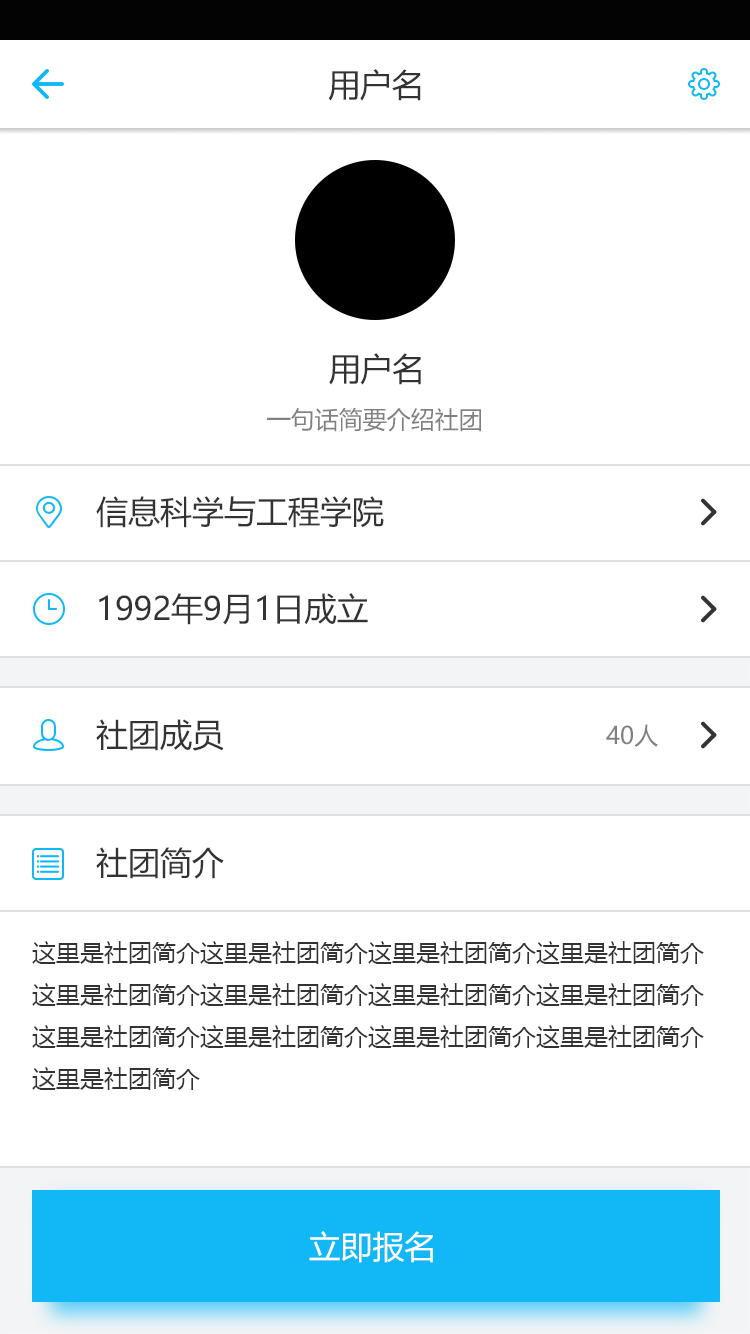
<style>
.page{position:relative;width:750px;height:1334px;background:#ffffff}
.page>*{position:absolute;margin:0}
.t1{font:32px "MicrosoftYaHei";color:#333333}
.t2{font:24px "MicrosoftYaHei";color:#808080}
.t3{font:24px "MicrosoftYaHei";color:#333333}
.t4{font:32px "MicrosoftYaHei";color:#ffffff}
</style>
<div class="page">
<p class="t1" style="left:328px;top:69px;width:93px;height:32px">用户名</p>
<p class="t1" style="left:329px;top:353px;width:92px;height:32px">用户名</p>
<p class="t2" style="left:267px;top:408px;width:214px;height:24px">一句话简要介绍社团</p>
<p class="t1" style="left:96px;top:496px;width:288px;height:32px">信息科学与工程学院</p>
<p class="t1" style="left:99px;top:593px;width:269px;height:32px">1992年9月1日成立</p>
<p class="t1" style="left:96px;top:719px;width:128px;height:32px">社团成员</p>
<p class="t2" style="left:606px;top:724px;width:52px;height:23px">40人</p>
<p class="t1" style="left:96px;top:847px;width:128px;height:32px">社团简介</p>
<p class="t3" style="left:32px;top:941px;width:672px;height:149px">这里是社团简介这里是社团简介这里是社团简介这里是社团简介这里是社团简介这里是社团简介这里是社团简介这里是社团简介这里是社团简介这里是社团简介这里是社团简介这里是社团简介这里是社团简介</p>
<p class="t4" style="left:309px;top:1231px;width:124px;height:32px">立即报名</p>
</div>
